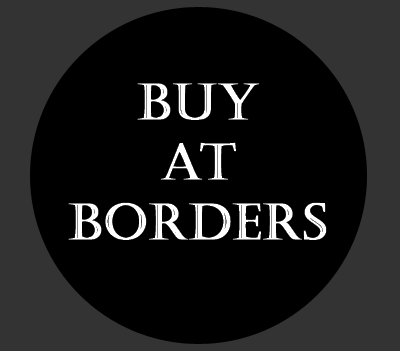
<style>
.page{position:relative;width:400px;height:351px;background:#000000}
.page>*{position:absolute;margin:0}
.t1{font:50px "Castellar";color:#ffffff;font-weight:bold}
</style>
<div class="page">
<p class="t1" style="left:68px;top:83px;width:259px;height:157px;text-align:center">Buy<br>at<br>Borders</p>
</div>
